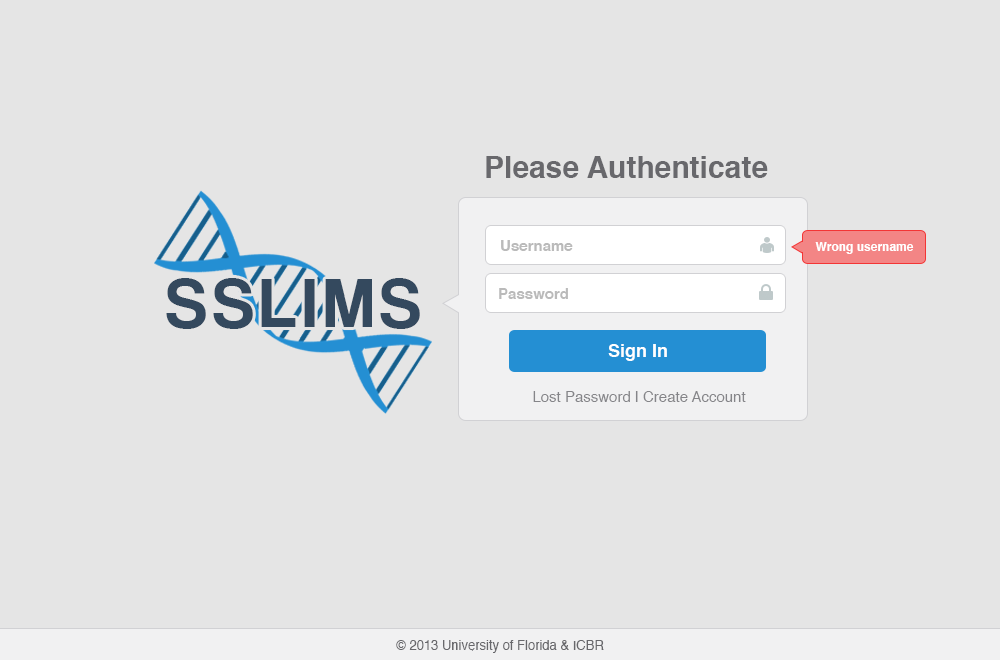
<style>
.page{position:relative;width:1000px;height:660px;background:#e5e5e5}
.page>*{position:absolute;margin:0}
.t1{font:30px "Helvetica-Bold";color:#68686c}
.t2{font:15px "Helvetica-Bold";color:#bababa}
.t3{font:12px "Helvetica-Bold";color:#ffffff}
.t4{font:72px "CoolveticaRg-Regular";letter-spacing:0.1em;color:#34495e}
.t5{font:18px "Helvetica-Bold";color:#ffffff}
.t6{font:15px "Helvetica";color:#858589}
.t7{font:13px "Helvetica";color:#68686c}
</style>
<div class="page">
<p class="t1" style="left:486px;top:156px;width:282px;height:22px">Please Authenticate</p>
<p class="t2" style="left:501px;top:240px;width:72px;height:11px">Username</p>
<p class="t3" style="left:815px;top:242px;width:99px;height:12px">Wrong username</p>
<p class="t4" style="left:166px;top:278px;width:254px;height:51px">SSLIMS</p>
<p class="t2" style="left:499px;top:288px;width:69px;height:11px">Password</p>
<p class="t5" style="left:608px;top:344px;width:59px;height:17px">Sign In</p>
<p class="t6" style="left:533px;top:391px;width:213px;height:11px">Lost Password | Create Account</p>
<p class="t7" style="left:396px;top:640px;width:208px;height:13px">© 2013 University of Florida &amp; ICBR</p>
</div>
